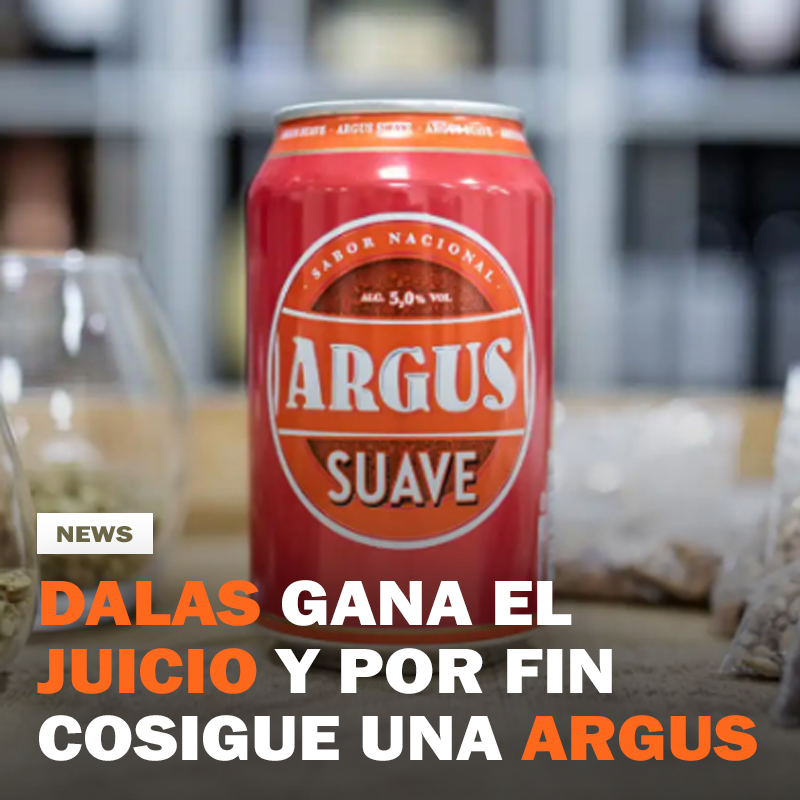
<style>
.page{position:relative;width:800px;height:800px}
.page>*{position:absolute;margin:0}
.t1{font:23.6px "FranklinGothic-Heavy";color:#6d6847;scale:1.18 1}
.t2{font:66px "FranklinGothic-Heavy";color:#ffffff;scale:1.1 1}
.t3{font:66px "FranklinGothic-Heavy";color:#fe681c;scale:1.1 1}
</style>
<div class="page">
<p class="t1" style="left:57px;top:526px;width:76px;height:17px">NEWS</p>
<p class="t2" style="left:37px;top:580px;width:720px;height:181px"><span class="t3">DALAS</span> GANA EL<br><span class="t3">JUICIO </span>Y POR FIN<br>COSIGUE UNA <span class="t3">ARGUS</span></p>
</div>
